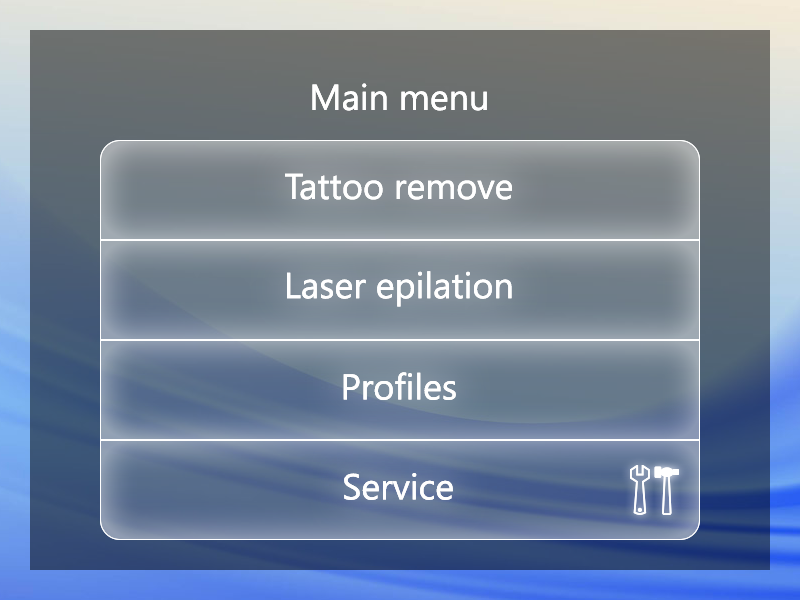
<style>
.page{position:relative;width:800px;height:600px}
.page>*{position:absolute;margin:0}
.t1{font:36px "SegoeUI";color:#ffffff}
</style>
<div class="page">
<p class="t1" style="left:312px;top:83px;width:175px;height:28px">Main menu</p>
<p class="t1" style="left:312px;top:83px;width:175px;height:28px">Main menu</p>
<p class="t1" style="left:285px;top:173px;width:227px;height:27px">Tattoo remove</p>
<p class="t1" style="left:285px;top:173px;width:227px;height:27px">Tattoo remove</p>
<p class="t1" style="left:287px;top:271px;width:225px;height:36px">Laser epilation</p>
<p class="t1" style="left:287px;top:271px;width:225px;height:36px">Laser epilation</p>
<p class="t1" style="left:343px;top:372px;width:113px;height:28px">Profiles</p>
<p class="t1" style="left:343px;top:372px;width:113px;height:28px">Profiles</p>
<p class="t1" style="left:344px;top:473px;width:109px;height:27px">Service</p>
<p class="t1" style="left:344px;top:473px;width:109px;height:27px">Service</p>
</div>
